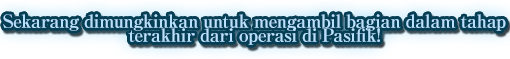
<style>
.page{position:relative;width:510px;height:59px}
.page>*{position:absolute;margin:0}
.t1{font:18px/14px "RyuminPro-ExBold";letter-spacing:-0.04em;color:#b9e0ff}
</style>
<div class="page">
<p class="t1" style="left:3px;top:14px;width:503px;height:31px;text-align:center">Sekarang dimungkinkan untuk mengambil bagian dalam tahap<br>terakhir dari operasi di Pasifik!</p>
</div>
